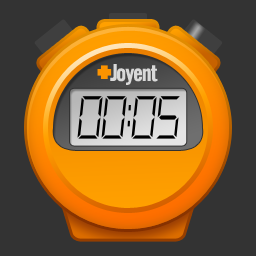
<style>
.page{position:relative;width:256px;height:256px;background:#333333}
.page>*{position:absolute;margin:0}
.t1{font:25.6px "GothicBoldCond";letter-spacing:-0.025em;color:#d9d9d9}
.t2{font:25.6px "GothicBoldCond";letter-spacing:-0.029em;color:#d9d9d9}
.t3{font:25.6px "GothicBoldCond";letter-spacing:-0.02em;color:#d9d9d9}
.t4{font:25.6px "GothicBoldCond";letter-spacing:-0.005em;color:#d9d9d9}
.t5{font:25.6px "GothicBoldCond";letter-spacing:-0.01em;color:#d9d9d9}
</style>
<div class="page">
<p class="t1" style="left:110px;top:64px;width:48px;height:21px">J<span class="t2">o</span>y<span class="t3">e</span><span class="t4">n</span><span class="t5">t</span></p>
</div>
